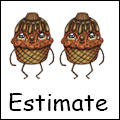
<style>
.page{position:relative;width:120px;height:120px;background:#ffffff}
.page>*{position:absolute;margin:0}
.t1{font:24px "ComicSansMS";color:#000000}
</style>
<div class="page">
<p class="t1" style="left:9px;top:93px;width:99px;height:18px">Estimate</p>
</div>
